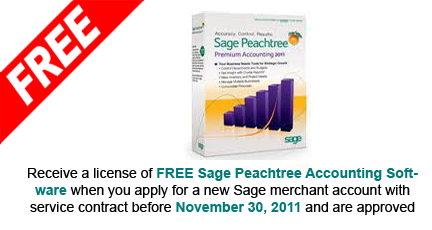
<style>
.page{position:relative;width:432px;height:230px;background:#ffffff}
.page>*{position:absolute;margin:0}
.t1{font:14px "ArialMT";color:#000000}
.t2{font:14px "Arial-BoldMT";color:#007b79}
</style>
<div class="page">
<p class="t1" style="left:28px;top:168px;width:390px;height:47px;text-align:center">Receive a license of <span class="t2">FREE Sage Peachtree Accounting Software</span> when you apply for a new Sage merchant account with service contract before <span class="t2">November 30, 2011</span> and are approved</p>
</div>
